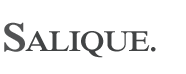
<style>
.page{position:relative;width:186px;height:74px;background:#ffffff}
.page>*{position:absolute;margin:0}
.t1{font:29.9px "IskoolaPota-Bold";letter-spacing:-0.025em;color:#414344}
.t2{font:41.8px "IskoolaPota-Bold";letter-spacing:-0.025em;color:#525354}
</style>
<div class="page">
<p class="t1" style="left:4px;top:22px;width:152px;height:36px"><span class="t2">S</span>ALIQUE.</p>
</div>
